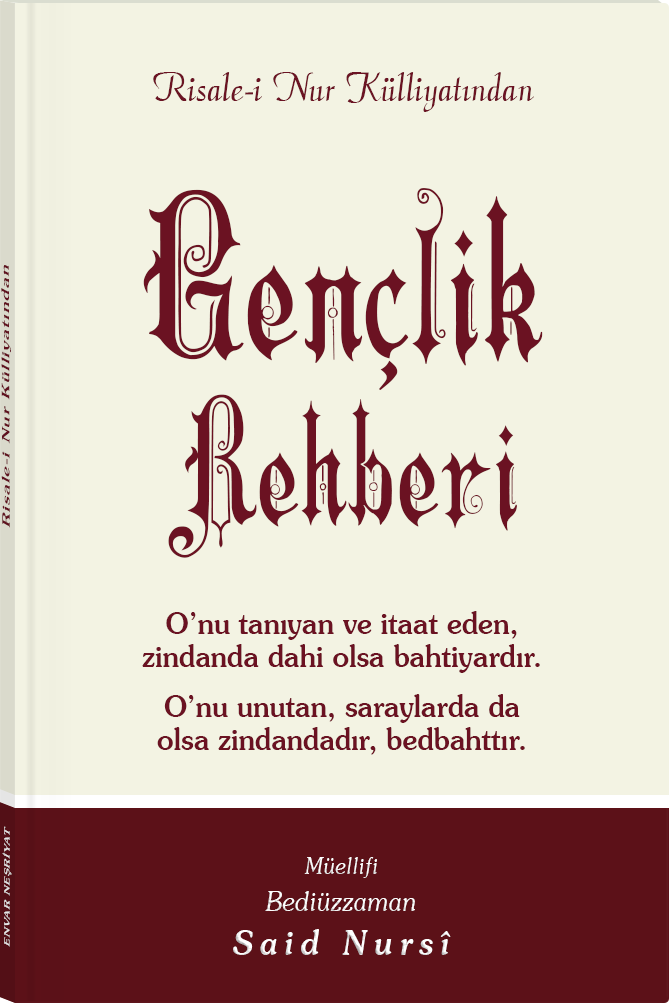
<style>
.page{position:relative;width:669px;height:1003px;background:#f3f3e3}
.page>*{position:absolute;margin:0}
.t1{font:45.3px "Barla © 072 Aria ScriptScriptSSi";color:#6b1323;scale:0.94 1}
.t2{font:216.2px/192.9px "Barla © 001 Liva Nur";letter-spacing:-0.001em;color:#6b1222;scale:0.93 1}
.t3{font:167.8px/166.8px "Barla © 001 Liva Nur";letter-spacing:-0.001em;color:#6b1222;scale:0.93 1}
.t4{font:11.4px "Souvenir-Medium";letter-spacing:0.08em;color:#6b1323;scale:1.65 1}
.t5{font:30.3px/33px "Souvenir-Medium";color:#6b1222;scale:0.92 1}
.t6{font:30.3px/50px "Souvenir-Medium";color:#6b1222;scale:0.92 1}
.t7{font:8.3px "Souvenir-Medium";letter-spacing:0.08em;color:#e5e5e5;scale:1.43 1}
.t8{font:27.1px/37.8px "Souvenir-LightItalic";color:#ffffff;scale:0.92 1}
.t9{font:22.8px/39.8px "Souvenir-LightItalic";color:#ffffff;scale:0.92 1}
.t10{font:33.9px/43.8px "Souvenir-MediumItalic";letter-spacing:0.2em;color:#ffffff;scale:0.92 1}
</style>
<div class="page">
<p class="t1" style="left:153px;top:72px;width:381px;height:40px">Risale-i Nur Külliyatından</p>
<p class="t2" style="left:143px;top:188px;width:400px;height:370px;text-align:center">Gençlik<br><span class="t3">Rehberi</span></p>
<p class="t4" style="left:1px;top:265px;width:10px;height:263px;rotate:-90deg">Risale-i Nur Külliyatından</p>
<p class="t5" style="left:142px;top:611px;width:398px;height:144px;text-align:center">O’nu tanıyan ve itaat eden,<br>zindanda dahi olsa bahtiyardır.<br>O’nu unutan, <span class="t6">saraylarda </span>da<br>olsa zindandadır, bedbahttır.</p>
<p class="t7" style="left:2px;top:826px;width:10px;height:121px;rotate:-90deg">ENVAR NEŞRİYAT</p>
<p class="t8" style="left:233px;top:857px;width:218px;height:98px;text-align:center"><span class="t9">Müellifi<br></span>Bediüzzaman<br><span class="t10">Said Nursî</span></p>
</div>
